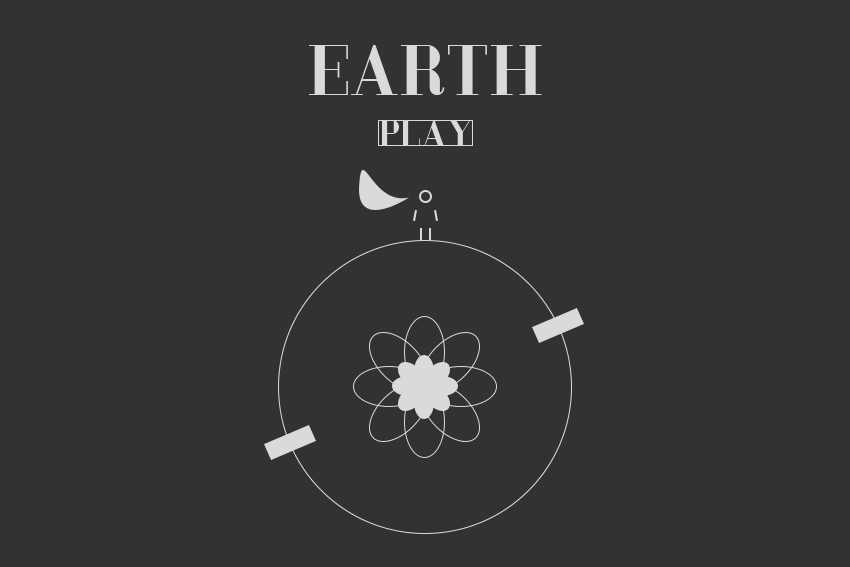
<style>
.page{position:relative;width:850px;height:567px;background:#343131}
.page>*{position:absolute;margin:0}
.t1{font:72px "LondonFill";color:#dadada}
.t2{font:37.4px "LondonFill";color:#dadada}
</style>
<div class="page">
<p class="t1" style="left:309px;top:45px;width:233px;height:50px">EARTH</p>
<p class="t2" style="left:379px;top:120px;width:94px;height:26px">PLAY</p>
</div>
